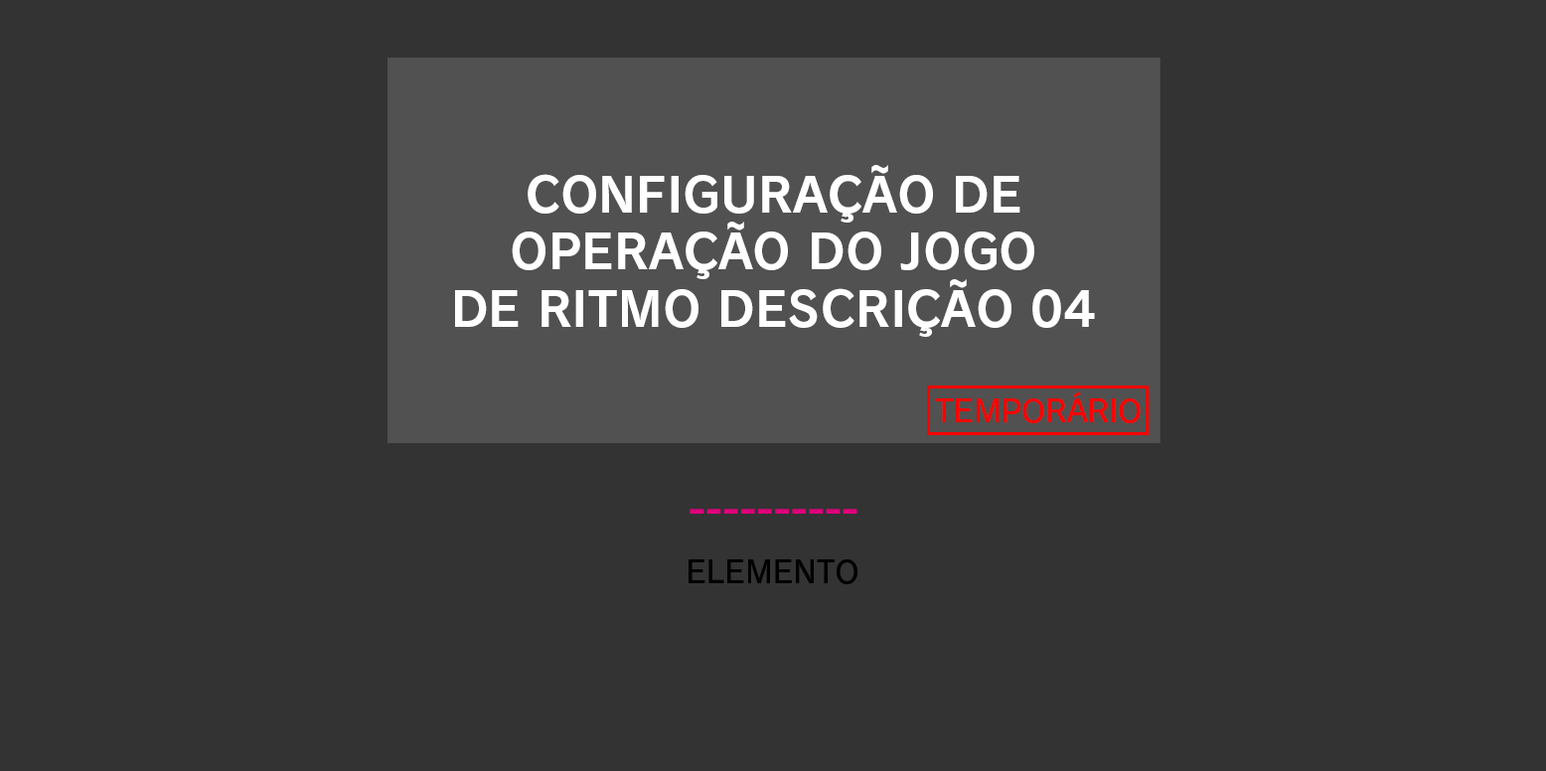
<style>
.page{position:relative;width:1546px;height:771px;background:#333333}
.page>*{position:absolute;margin:0}
.t1{font:47.7px "RodinNTLGPro-B";color:#ffffff}
.t2{font:30.5px "RodinProN-DB";letter-spacing:-0.014em;color:#ff0000}
.t3{font:30.5px "RodinNTLGPro-DB";color:#010101}
</style>
<div class="page">
<p class="t1" style="left:455px;top:165px;width:640px;height:172px;text-align:center">CONFIGURAÇÃO DE<br>OPERAÇÃO DO JOGO<br>DE RITMO DESCRIÇÃO 04</p>
<p class="t2" style="left:935px;top:392px;width:206px;height:31px">TEMPORÁRIO</p>
<p class="t3" style="left:689px;top:559px;width:169px;height:25px">ELEMENTO</p>
</div>
